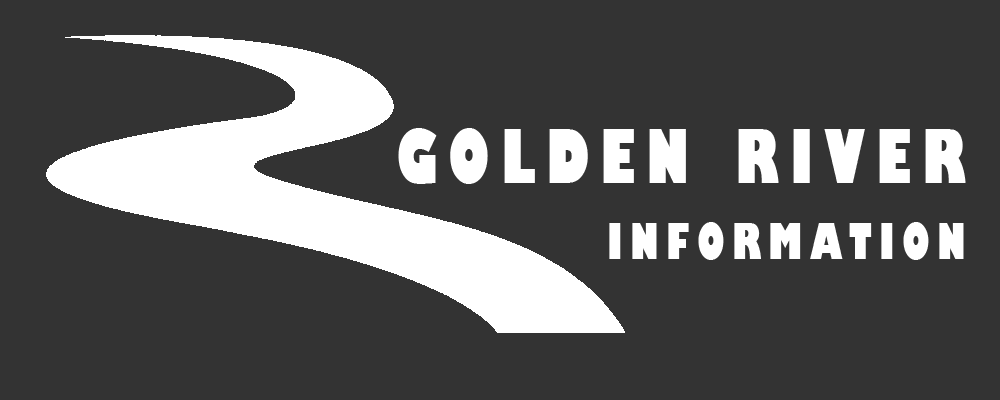
<style>
.page{position:relative;width:1000px;height:400px;background:#333333}
.page>*{position:absolute;margin:0}
.t1{font:72px "GillSans-UltraBoldCondensed";letter-spacing:0.15em;color:#ffffff}
.t2{font:48px "GillSans-UltraBoldCondensed";letter-spacing:0.15em;color:#ffffff}
</style>
<div class="page">
<p class="t1" style="left:398px;top:128px;width:568px;height:56px">GOLDEN RIVER</p>
<p class="t2" style="left:609px;top:222px;width:355px;height:38px">INFORMATION</p>
</div>
